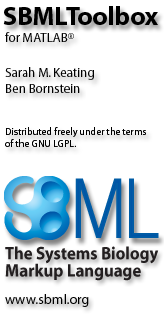
<style>
.page{position:relative;width:164px;height:314px;background:#ffffff}
.page>*{position:absolute;margin:0}
.t1{font:26px "Myriad-Bold";color:#000000}
.t2{font:13px "Myriad-Roman";color:#000000}
.t3{font:10px/12px "Myriad-Roman";color:#000000}
.t4{font:14px "Myriad-Roman";color:#000000}
</style>
<div class="page">
<p class="t1" style="left:3px;top:6px;width:155px;height:19px">SBMLToolbox</p>
<p class="t2" style="left:5px;top:32px;width:69px;height:10px">for MATLAB®</p>
<p class="t2" style="left:5px;top:67px;width:89px;height:13px">Sarah M. Keating</p>
<p class="t2" style="left:6px;top:84px;width:74px;height:9px">Ben Bornstein</p>
<p class="t3" style="left:5px;top:127px;width:141px;height:20px">Distributed freely under the terms <br>of the GNU LGPL.</p>
<p class="t4" style="left:5px;top:294px;width:84px;height:13px">www.sbml.org</p>
</div>
